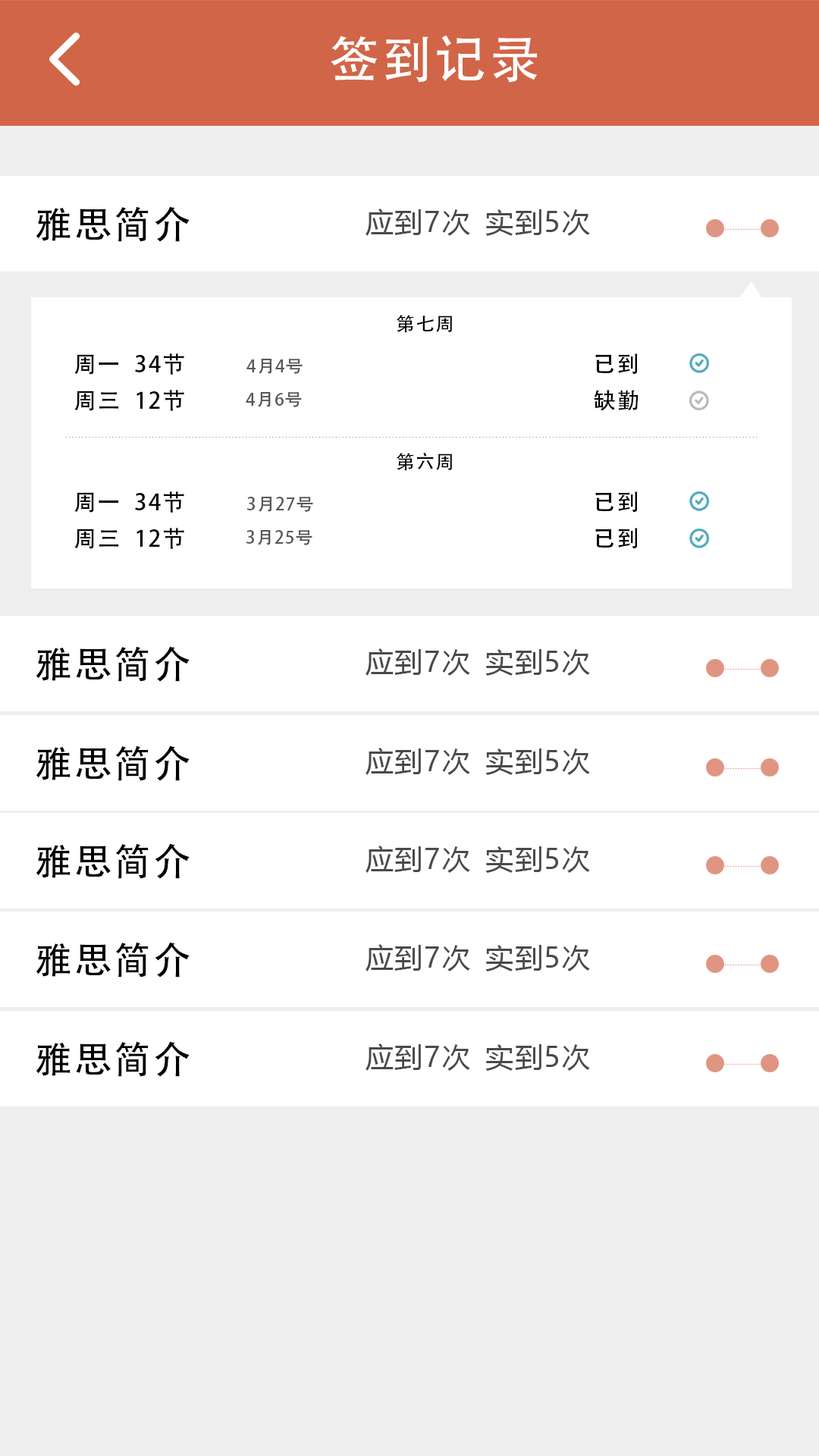
<style>
.page{position:relative;width:819px;height:1456px;background:#ffffff}
.page>*{position:absolute;margin:0}
.t1{font:50.8px "AdobeHeitiStd-Regular";letter-spacing:0.06em;color:#ffffff}
.t2{font:37.1px "AdobeHeitiStd-Regular";letter-spacing:0.06em;color:#000000}
.t3{font:27.6px "MicrosoftYaHei";letter-spacing:0.06em;color:#4a4a4a}
.t4{font:18.7px "AdobeHeitiStd-Regular";letter-spacing:0.06em;color:#000000}
.t5{font:22.6px "AdobeHeitiStd-Regular";letter-spacing:0.06em;color:#000000}
.t6{font:17.1px "AdobeHeitiStd-Regular";letter-spacing:0.06em;color:#585858}
</style>
<div class="page">
<p class="t1" style="left:331px;top:35px;width:206px;height:48px">签到记录</p>
<p class="t2" style="left:36px;top:206px;width:154px;height:36px">雅思简介</p>
<p class="t3" style="left:366px;top:209px;width:104px;height:27px">应到7次</p>
<p class="t3" style="left:485px;top:209px;width:105px;height:27px">实到5次</p>
<p class="t4" style="left:397px;top:315px;width:55px;height:18px">第七周</p>
<p class="t5" style="left:74px;top:353px;width:110px;height:22px">周一  34节</p>
<p class="t5" style="left:595px;top:353px;width:43px;height:22px">已到</p>
<p class="t6" style="left:246px;top:358px;width:57px;height:16px">4月4号</p>
<p class="t5" style="left:74px;top:390px;width:110px;height:21px">周三  12节</p>
<p class="t5" style="left:594px;top:390px;width:45px;height:21px">缺勤</p>
<p class="t6" style="left:246px;top:391px;width:56px;height:16px">4月6号</p>
<p class="t4" style="left:397px;top:453px;width:55px;height:18px">第六周</p>
<p class="t5" style="left:74px;top:491px;width:110px;height:22px">周一  34节</p>
<p class="t6" style="left:246px;top:496px;width:67px;height:16px">3月27号</p>
<p class="t5" style="left:595px;top:491px;width:43px;height:22px">已到</p>
<p class="t5" style="left:74px;top:528px;width:110px;height:21px">周三  12节</p>
<p class="t6" style="left:246px;top:529px;width:66px;height:16px">3月25号</p>
<p class="t5" style="left:595px;top:528px;width:43px;height:21px">已到</p>
<p class="t2" style="left:36px;top:646px;width:154px;height:36px">雅思简介</p>
<p class="t3" style="left:366px;top:648px;width:104px;height:28px">应到7次</p>
<p class="t3" style="left:485px;top:649px;width:105px;height:27px">实到5次</p>
<p class="t2" style="left:36px;top:745px;width:154px;height:36px">雅思简介</p>
<p class="t3" style="left:366px;top:748px;width:104px;height:27px">应到7次</p>
<p class="t3" style="left:485px;top:748px;width:105px;height:27px">实到5次</p>
<p class="t2" style="left:36px;top:843px;width:154px;height:36px">雅思简介</p>
<p class="t3" style="left:366px;top:846px;width:104px;height:27px">应到7次</p>
<p class="t3" style="left:485px;top:846px;width:105px;height:27px">实到5次</p>
<p class="t2" style="left:36px;top:942px;width:154px;height:35px">雅思简介</p>
<p class="t3" style="left:366px;top:944px;width:104px;height:27px">应到7次</p>
<p class="t3" style="left:485px;top:945px;width:105px;height:26px">实到5次</p>
<p class="t2" style="left:36px;top:1041px;width:154px;height:36px">雅思简介</p>
<p class="t3" style="left:366px;top:1043px;width:104px;height:28px">应到7次</p>
<p class="t3" style="left:485px;top:1044px;width:105px;height:27px">实到5次</p>
</div>
